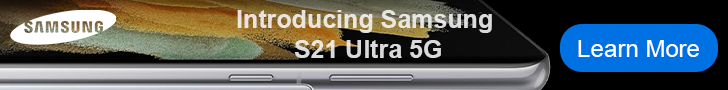
<style>
.page{position:relative;width:728px;height:90px}
.page>*{position:absolute;margin:0}
.t1{font:25px "Arial-BoldMT";color:#e6e2dc}
.t2{font:24px "ArialMT";color:#ffffff}
</style>
<div class="page">
<p class="t1" style="left:237px;top:10px;width:255px;height:48px;text-align:center">Introducing Samsung<br> S21 Ultra 5G</p>
<p class="t2" style="left:578px;top:40px;width:121px;height:17px">Learn More</p>
</div>
